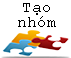
<style>
.page{position:relative;width:71px;height:58px;background:#ffffff}
.page>*{position:absolute;margin:0}
.t1{font:16px/15px "CourierNewPSMT";color:#000000}
</style>
<div class="page">
<p class="t1" style="left:18px;top:3px;width:38px;height:24px;text-align:center">Tạo<br>nhóm</p>
</div>
